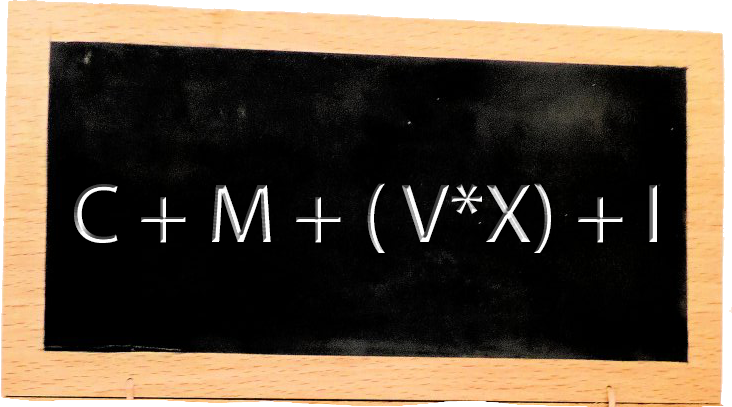
<style>
.page{position:relative;width:732px;height:407px}
.page>*{position:absolute;margin:0}
.t1{font:85px "MyriadPro-Regular"}
</style>
<div class="page">
<p class="t1" style="left:74px;top:183px;width:583px;height:70px">C + M + ( V*X) + I</p>
</div>
